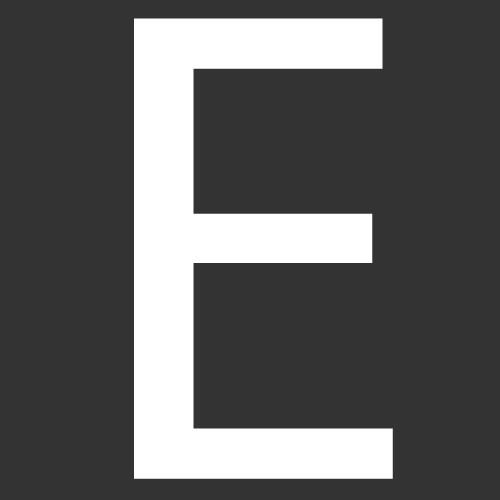
<style>
.page{position:relative;width:500px;height:500px;background:#333333}
.page>*{position:absolute;margin:0}
.t1{font:682.2px "MyriadPro-Regular";color:#ffffff}
</style>
<div class="page">
<p class="t1" style="left:134px;top:18px;width:259px;height:461px">E</p>
</div>
